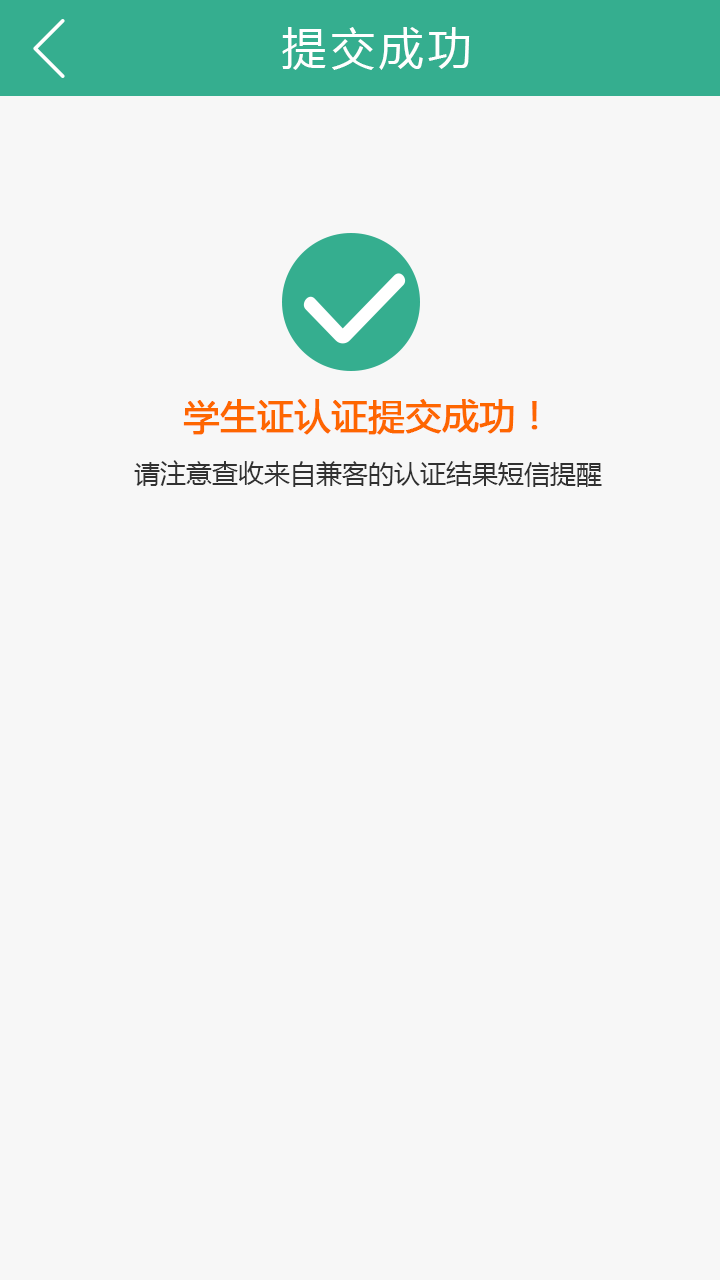
<style>
.page{position:relative;width:720px;height:1280px;background:#f7f7f7}
.page>*{position:absolute;margin:0}
.t1{font:44px "MicrosoftYaHei";letter-spacing:0.1em;color:#ffffff}
.t2{font:26px "MicrosoftYaHei";color:#313131}
.t3{font:36px "MicrosoftYaHei";color:#fe6600;font-weight:bold}
</style>
<div class="page">
<p class="t1" style="left:282px;top:27px;width:188px;height:43px">提交成功</p>
<p class="t2" style="left:134px;top:399px;width:468px;height:88px;text-align:center"><span class="t3">学生证认证提交成功！<br></span>请注意查收来自兼客的认证结果短信提醒</p>
</div>
